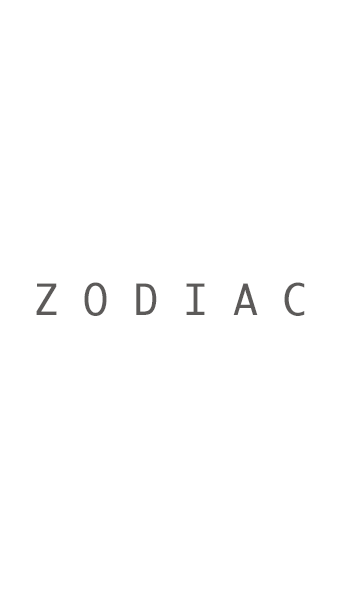
<style>
.page{position:relative;width:338px;height:600px;background:#ffffff}
.page>*{position:absolute;margin:0}
.t1{font:41.7px "Ayuthaya";color:#5c5a59}
</style>
<div class="page">
<p class="t1" style="left:36px;top:282px;width:269px;height:34px">Z O D I A C</p>
</div>
